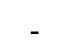
<style>
.page{position:relative;width:70px;height:55px;background:#ffffff}
.page>*{position:absolute;margin:0}
.t1{font:31.8px "DroidSans";color:#000000}
</style>
<div class="page">
<p class="t1" style="left:30px;top:31px;width:9px;height:3px">-</p>
</div>
